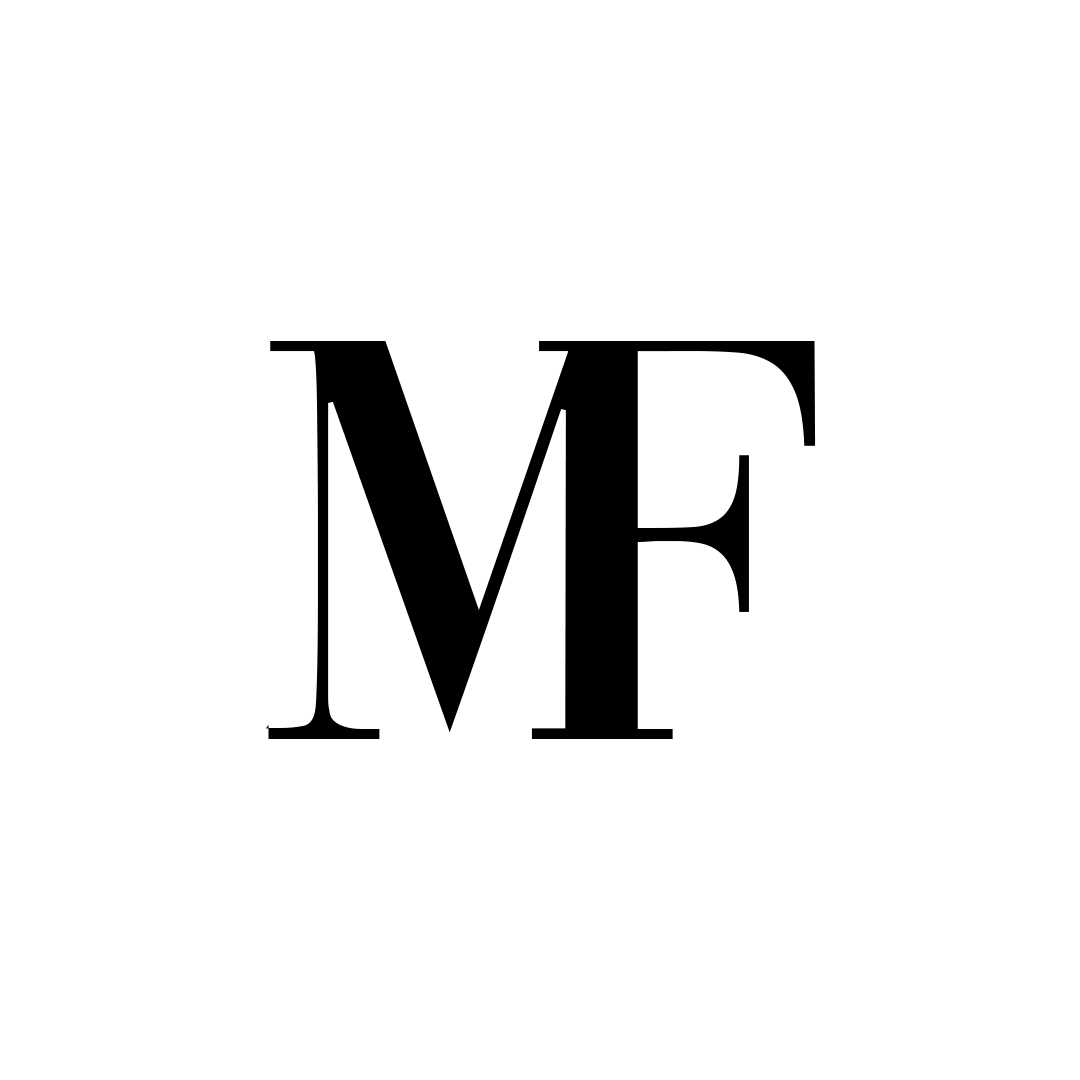
<style>
.page{position:relative;width:1080px;height:1080px;background:#ffffff}
.page>*{position:absolute;margin:0}
.t1{font:595.8px "Vogue-Regular";letter-spacing:0.2em;color:#000000}
</style>
<div class="page">
<p class="t1" style="left:266px;top:341px;width:404px;height:398px">M</p>
<p class="t1" style="left:539px;top:341px;width:277px;height:398px">f</p>
</div>
